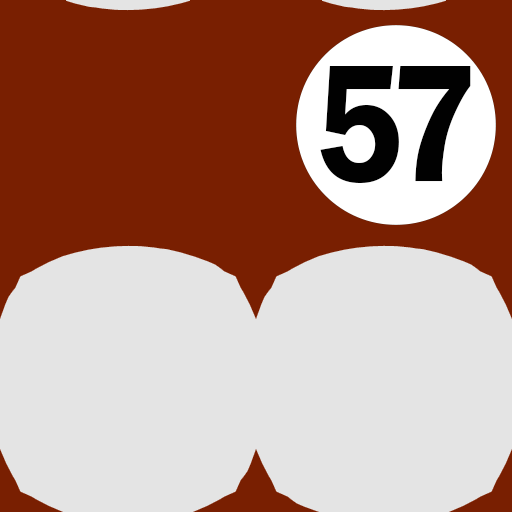
<style>
.page{position:relative;width:512px;height:512px;background:#e4e4e4}
.page>*{position:absolute;margin:0}
.t1{font:172.5px "FranklinGothic-Demi";letter-spacing:-0.05em;color:#010101;scale:0.87 1}
</style>
<div class="page">
<p class="t1" style="left:320px;top:66px;width:151px;height:117px">57</p>
</div>
